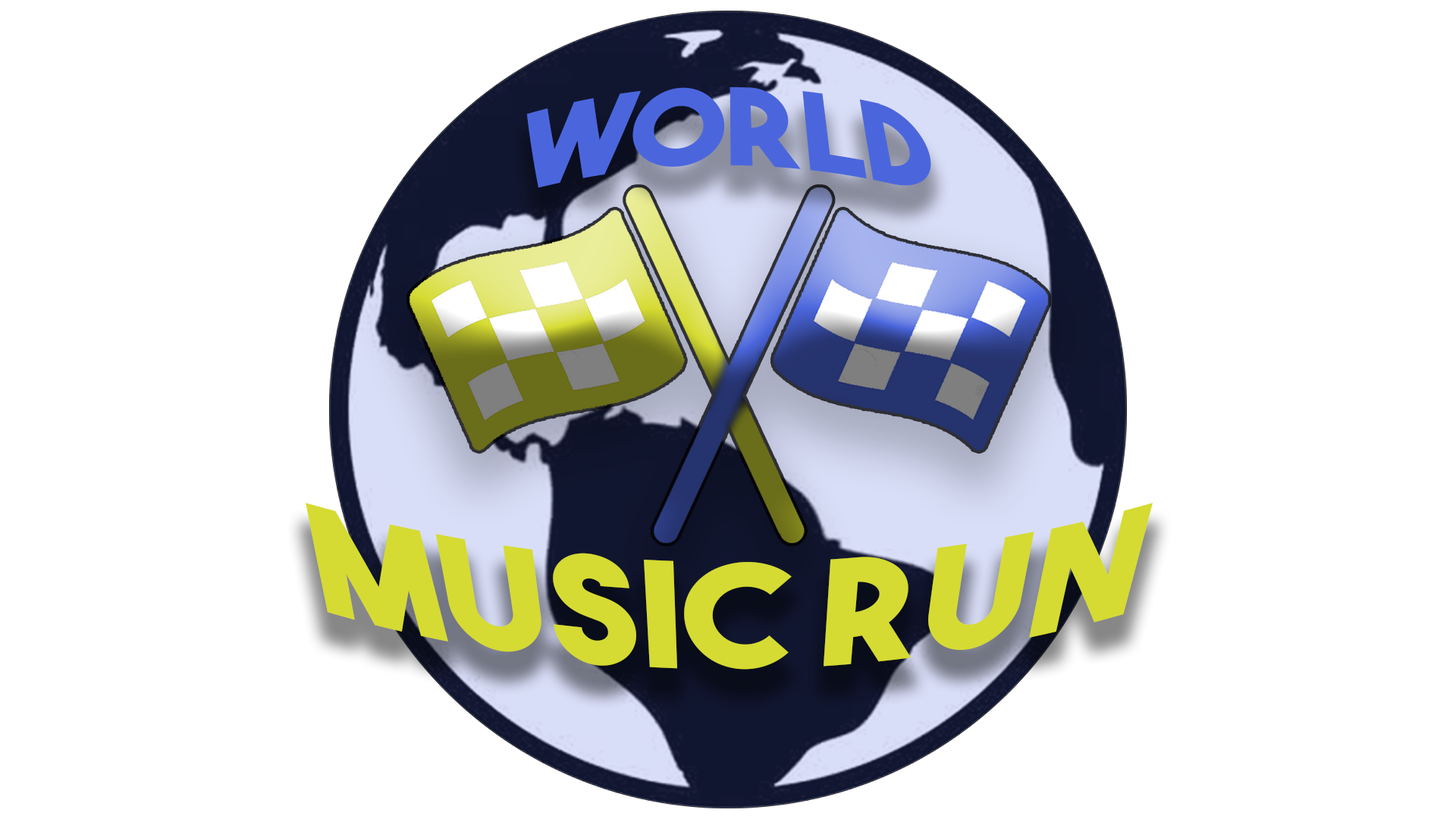
<style>
.page{position:relative;width:1456px;height:819px;background:#ffffff}
.page>*{position:absolute;margin:0}
.t1{font:115.3px "TheBoldFont";color:#4b66dc}
.t2{font:158px "TheBoldFont";color:#d5db32}
</style>
<div class="page">
<p class="t1" style="left:526px;top:86px;width:405px;height:102px">World</p>
<p class="t2" style="left:306px;top:503px;width:847px;height:167px">Music run</p>
</div>
